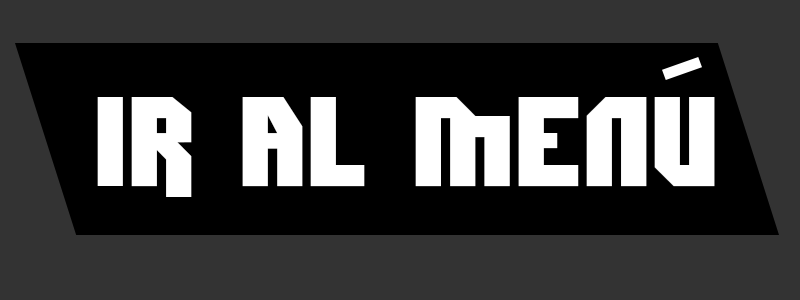
<style>
.page{position:relative;width:800px;height:300px;background:#333333}
.page>*{position:absolute;margin:0}
.t1{font:126.1px "Dimitri";color:#ffffff}
</style>
<div class="page">
<p class="t1" style="left:97px;top:97px;width:618px;height:100px">Ir al MENÚ</p>
</div>
